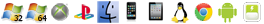
<style>
.page{position:relative;width:264px;height:24px;background:#ffffff}
.page>*{position:absolute;margin:0}
.t1{font:8px "Tahoma"}
</style>
<div class="page">
<p class="t1" style="left:14px;top:15px;width:9px;height:7px">32</p>
<p class="t1" style="left:38px;top:15px;width:9px;height:7px">64</p>
</div>
